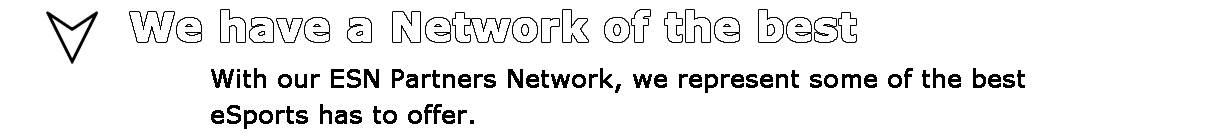
<style>
.page{position:relative;width:1225px;height:137px;background:#ffffff}
.page>*{position:absolute;margin:0}
.t1{font:24px/36px "Verdana";color:#000000;font-weight:bold}
</style>
<div class="page">
<p class="t1" style="left:211px;top:68px;width:814px;height:61px">With our ESN Partners Network, we represent some of the best eSports has to offer.</p>
</div>
